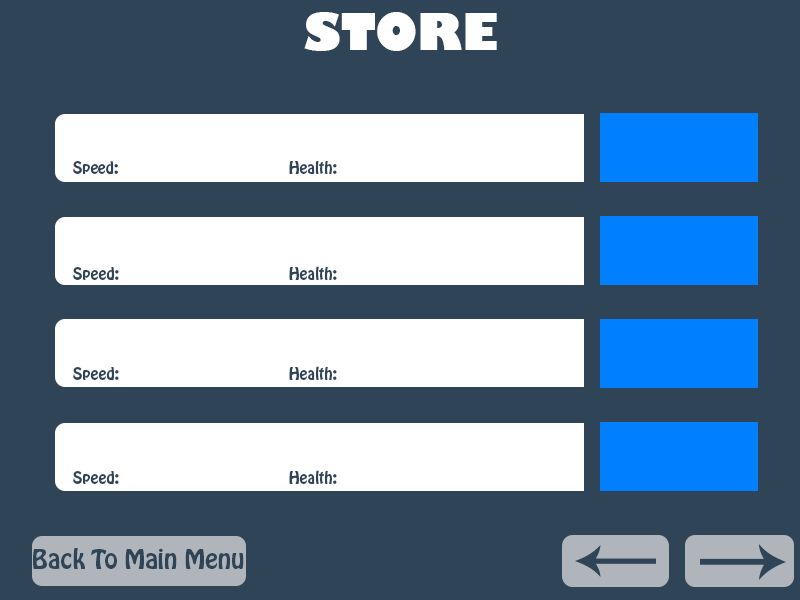
<style>
.page{position:relative;width:800px;height:600px;background:#304458}
.page>*{position:absolute;margin:0}
.t1{font:50px "GillSans-UltraBold";color:#ffffff}
.t2{font:15px "HoboStd";color:#304458}
.t3{font:15.4px "HoboStd";color:#304458}
.t4{font:24px "HoboStd";color:#304458}
</style>
<div class="page">
<p class="t1" style="left:304px;top:12px;width:193px;height:39px">STORE</p>
<p class="t2" style="left:73px;top:161px;width:264px;height:13px">Speed:     Health:</p>
<p class="t3" style="left:73px;top:266px;width:264px;height:14px">Speed:     Health:</p>
<p class="t3" style="left:73px;top:366px;width:264px;height:14px">Speed:     Health:</p>
<p class="t3" style="left:73px;top:470px;width:264px;height:14px">Speed:     Health:</p>
<p class="t4" style="left:33px;top:548px;width:211px;height:21px">Back To Main Menu</p>
</div>
